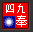
<style>
.page{position:relative;width:33px;height:32px;background:#f20000}
.page>*{position:absolute;margin:0}
.t1{font:10.4px "SimSun";color:#ffffff}
.t2{font:11.7px "SimSun";color:#ffffff}
</style>
<div class="page">
<p class="t1" style="left:6px;top:4px;width:19px;height:9px">四九</p>
<p class="t2" style="left:16px;top:15px;width:11px;height:12px">奉</p>
</div>
